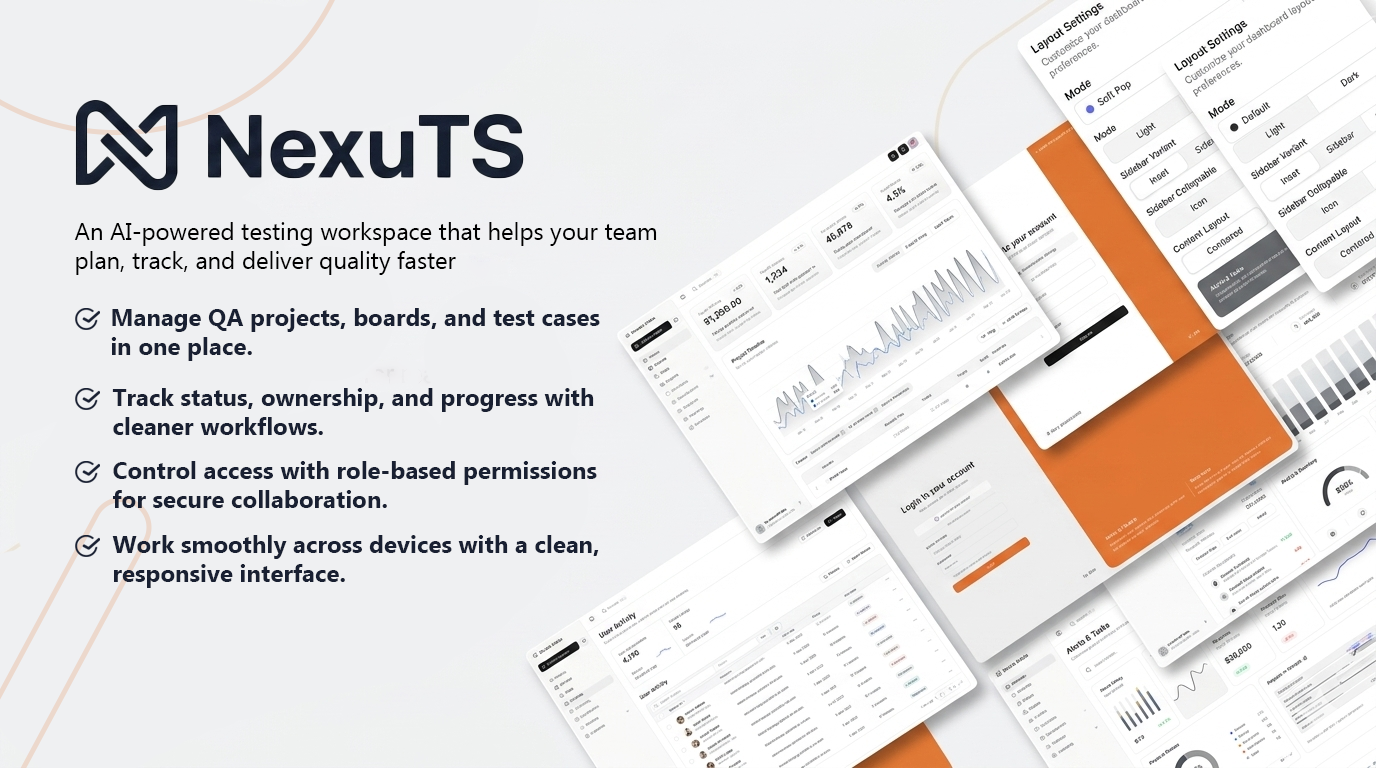
<style>
.page{position:relative;width:1376px;height:768px;background:#eff0f2}
.page>*{position:absolute;margin:0}
.t1{font:24px "Ebrima";color:#000000}
.t2{font:24px "Ebrima-Bold";color:#192032}
</style>
<div class="page">
<p class="t1" style="left:74px;top:222px;width:583px;height:53px">An AI-powered testing workspace that helps your team<br>plan, track, and deliver quality faster</p>
<p class="t2" style="left:111px;top:308px;width:489px;height:53px">Manage QA projects, boards, and test cases<br>in one place.</p>
<p class="t2" style="left:112px;top:388px;width:482px;height:47px">Track status, ownership, and progress with<br>cleaner workflows.</p>
<p class="t2" style="left:113px;top:461px;width:484px;height:47px">Control access with role-based permissions <br>for secure collaboration.</p>
<p class="t2" style="left:112px;top:535px;width:487px;height:53px">Work smoothly across devices with a clean,<br>responsive interface.</p>
</div>
